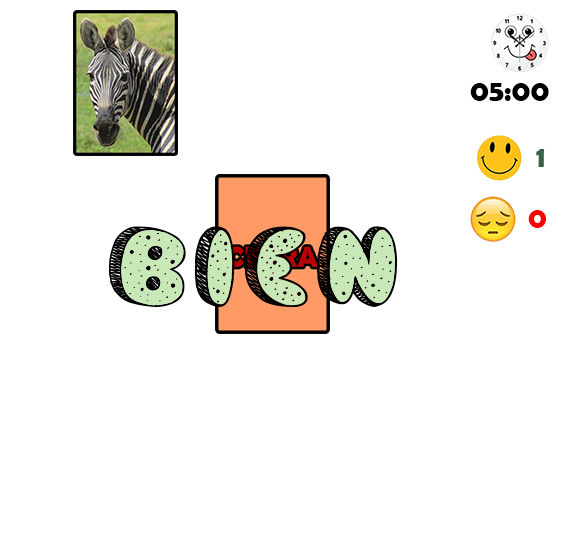
<style>
.page{position:relative;width:566px;height:558px;background:#ffffff}
.page>*{position:absolute;margin:0}
.t1{font:30px "BerlinSansFBDemi-Bold";color:#000000}
.t2{font:30px "BerlinSansFBDemi-Bold";color:#396341}
.t3{font:30px "BerlinSansFBDemi-Bold";color:#ff0000}
</style>
<div class="page">
<p class="t1" style="left:470px;top:83px;width:79px;height:18px">05:00</p>
<p class="t2" style="left:536px;top:149px;width:9px;height:18px">1</p>
<p class="t3" style="left:528px;top:210px;width:19px;height:18px">0</p>
</div>
